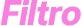
<style>
.page{position:relative;width:82px;height:26px;background:#ffffff}
.page>*{position:absolute;margin:0}
.t1{font:32px "RodinPro-EB";letter-spacing:-0.051em;color:#f980de;font-style:italic}
</style>
<div class="page">
<p class="t1" style="left:0px;top:0px;width:81px;height:26px">Filtro</p>
</div>
